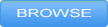
<style>
.page{position:relative;width:108px;height:27px}
.page>*{position:absolute;margin:0}
.t1{font:11.1px "Small Fonts";color:#fffefe;scale:1.5 1}
</style>
<div class="page">
<p class="t1" style="left:17px;top:8px;width:74px;height:10px">BROWSE</p>
</div>
